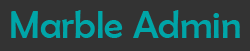
<style>
.page{position:relative;width:250px;height:51px;background:#333333}
.page>*{position:absolute;margin:0}
.t1{font:38.8px "BerlinSansFB-Reg";color:#00a5a8}
</style>
<div class="page">
<p class="t1" style="left:11px;top:10px;width:229px;height:28px">Marble Admin</p>
</div>
